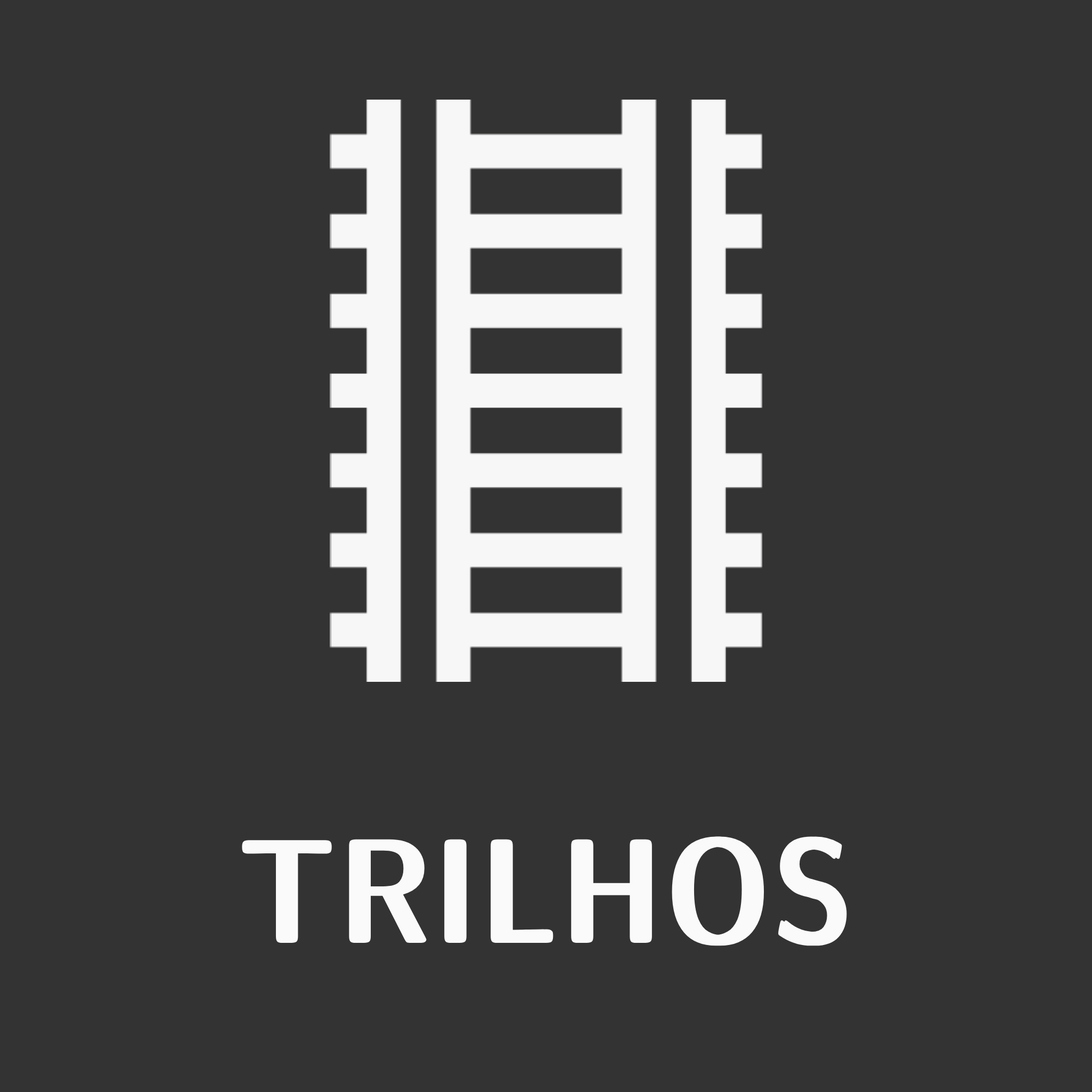
<style>
.page{position:relative;width:1092px;height:1092px;background:#333333}
.page>*{position:absolute;margin:0}
.t1{font:149.1px "CMUSansSerif-DemiCondensed";color:#fafafa;font-weight:bold}
</style>
<div class="page">
<p class="t1" style="left:242px;top:836px;width:605px;height:110px">TRILHOS</p>
</div>
